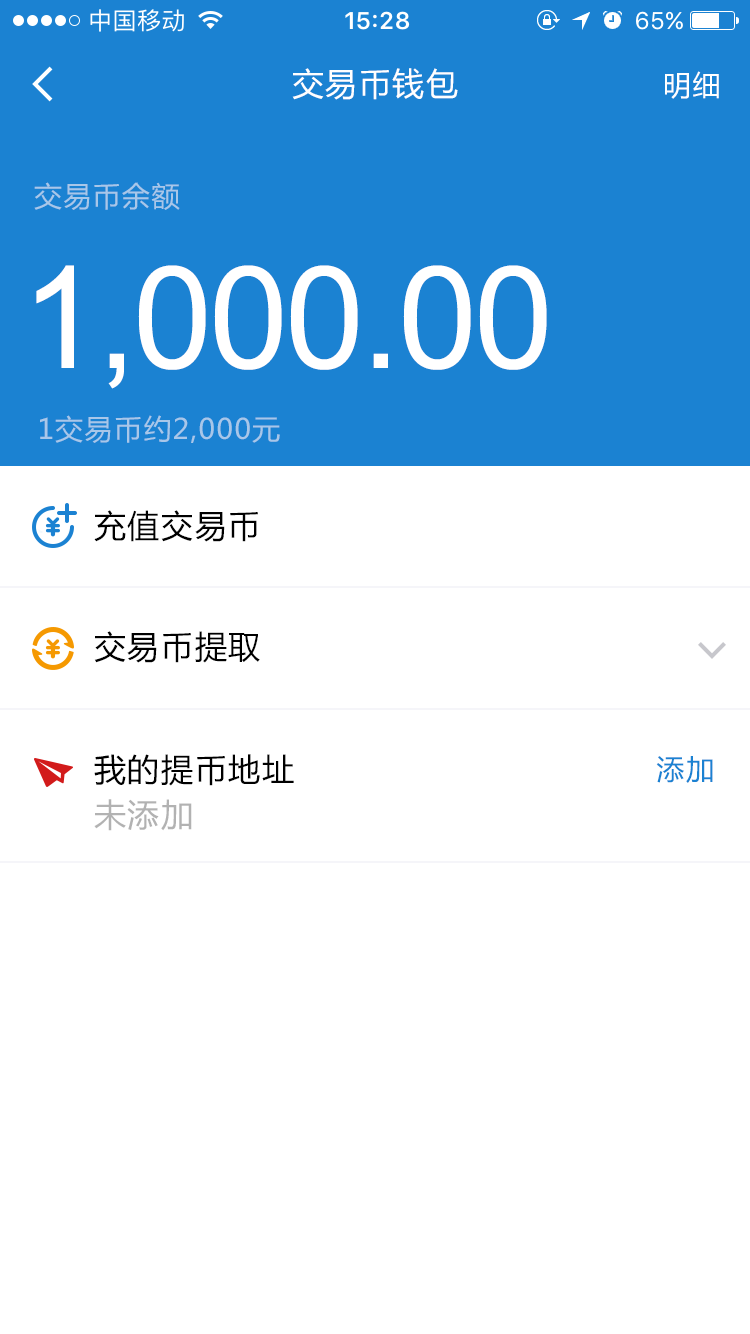
<style>
.page{position:relative;width:750px;height:1334px;background:#ffffff}
.page>*{position:absolute;margin:0}
.t1{font:32px "MicrosoftYaHei";letter-spacing:0.05em;color:#ffffff}
.t2{font:28px "MicrosoftYaHei";letter-spacing:0.05em;color:#ffffff}
.t3{font:28px "MicrosoftYaHei";letter-spacing:0.05em;color:#a8c7e9}
.t4{font:142.5px "ArialMT";letter-spacing:-0.022em;color:#ffffff}
.t5{font:32px "MicrosoftYaHei";letter-spacing:0.05em;color:#000000}
.t6{font:28px "MicrosoftYaHei";letter-spacing:0.05em;color:#1b82d2}
.t7{font:32px "MicrosoftYaHei";letter-spacing:0.05em;color:#b3b3b3}
</style>
<div class="page">
<p class="t1" style="left:292px;top:68px;width:166px;height:32px">交易币钱包</p>
<p class="t2" style="left:665px;top:71px;width:54px;height:28px">明细</p>
<p class="t3" style="left:34px;top:182px;width:146px;height:28px">交易币余额</p>
<p class="t4" style="left:36px;top:265px;width:511px;height:124px">1,000.00</p>
<p class="t3" style="left:40px;top:415px;width:240px;height:28px">1交易币约2,000元</p>
<p class="t5" style="left:94px;top:510px;width:164px;height:32px">充值交易币</p>
<p class="t5" style="left:94px;top:631px;width:166px;height:32px">交易币提取</p>
<p class="t5" style="left:94px;top:754px;width:200px;height:32px">我的提币地址</p>
<p class="t6" style="left:656px;top:756px;width:57px;height:27px">添加</p>
<p class="t7" style="left:94px;top:799px;width:98px;height:32px">未添加</p>
</div>
